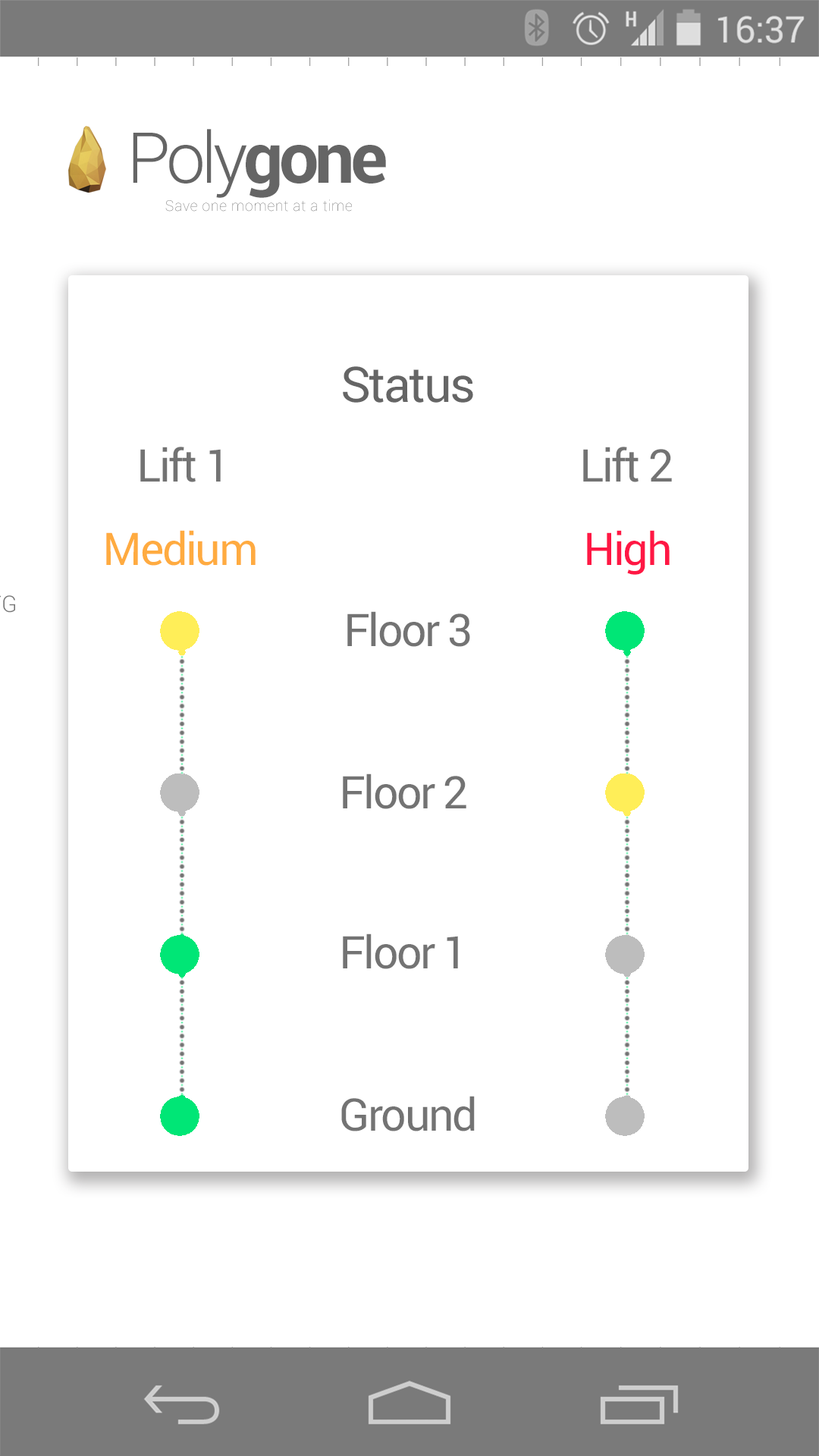
<style>
.page{position:relative;width:819px;height:1456px;background:#ffffff}
.page>*{position:absolute;margin:0}
.t1{font:70.5px "Roboto-Light";letter-spacing:-0.06em;color:#656565}
.t2{font:70.5px "Roboto-Bold";letter-spacing:-0.06em;color:#656565}
.t3{font:14.5px "Roboto-Thin";letter-spacing:0.04em}
.t4{font:49.2px "Roboto-Regular";letter-spacing:-0.04em;color:#656565}
.t5{font:44.9px "Roboto-Regular";letter-spacing:-0.04em;color:#737373}
.t6{font:44.9px "Roboto-Regular";letter-spacing:-0.04em;color:#ffab40}
.t7{font:44.9px "Roboto-Regular";letter-spacing:-0.04em;color:#ff1744}
</style>
<div class="page">
<p class="t1" style="left:133px;top:129px;width:253px;height:69px">Poly<span class="t2">gone</span></p>
<p class="t3" style="left:165px;top:199px;width:187px;height:13px">Save one moment at a time</p>
<p class="t4" style="left:343px;top:366px;width:130px;height:37px">Status</p>
<p class="t5" style="left:140px;top:447px;width:81px;height:35px">Lift 1</p>
<p class="t5" style="left:583px;top:447px;width:89px;height:35px">Lift 2</p>
<p class="t6" style="left:106px;top:530px;width:150px;height:36px">Medium</p>
<p class="t7" style="left:587px;top:530px;width:83px;height:45px">High</p>
<p class="t5" style="left:347px;top:611px;width:123px;height:36px">Floor 3</p>
<p class="t5" style="left:343px;top:773px;width:123px;height:36px">Floor 2</p>
<p class="t5" style="left:343px;top:933px;width:115px;height:36px">Floor 1</p>
<p class="t5" style="left:341px;top:1096px;width:134px;height:35px">Ground</p>
</div>
